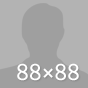
<style>
.page{position:relative;width:88px;height:88px;background:#b3b3b3}
.page>*{position:absolute;margin:0}
.t1{font:23px "Ubuntu";letter-spacing:-0.01em;color:#ffffff}
</style>
<div class="page">
<p class="t1" style="left:17px;top:63px;width:62px;height:18px">88×88</p>
</div>
